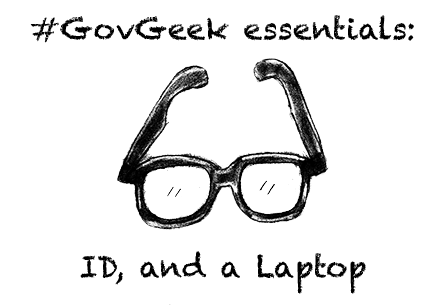
<style>
.page{position:relative;width:446px;height:305px;background:#ffffff}
.page>*{position:absolute;margin:0}
.t1{font:30px "Chalkduster";color:#000000}
</style>
<div class="page">
<p class="t1" style="left:30px;top:15px;width:384px;height:28px">#GovGeek essentials:</p>
<p class="t1" style="left:80px;top:251px;width:286px;height:43px">ID, and a Laptop</p>
</div>
